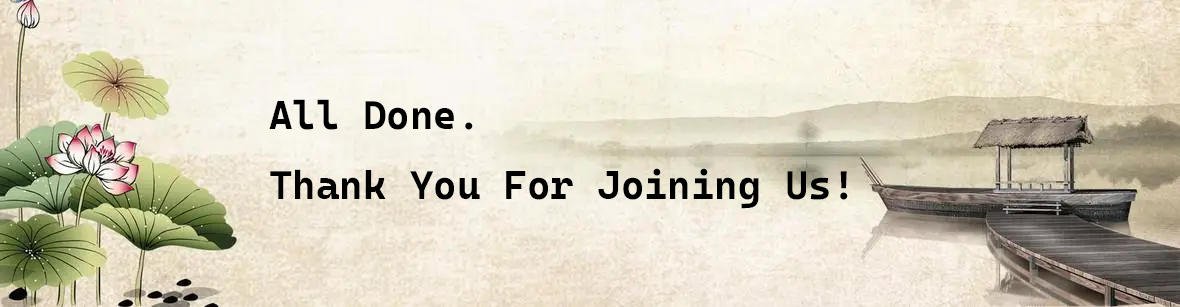
<style>
.page{position:relative;width:1180px;height:307px}
.page>*{position:absolute;margin:0}
.t1{font:40px "CascadiaMonoRoman-Bold";color:#000000}
</style>
<div class="page">
<p class="t1" style="left:269px;top:99px;width:579px;height:110px">All Done.<br>Thank You For Joining Us!</p>
</div>
